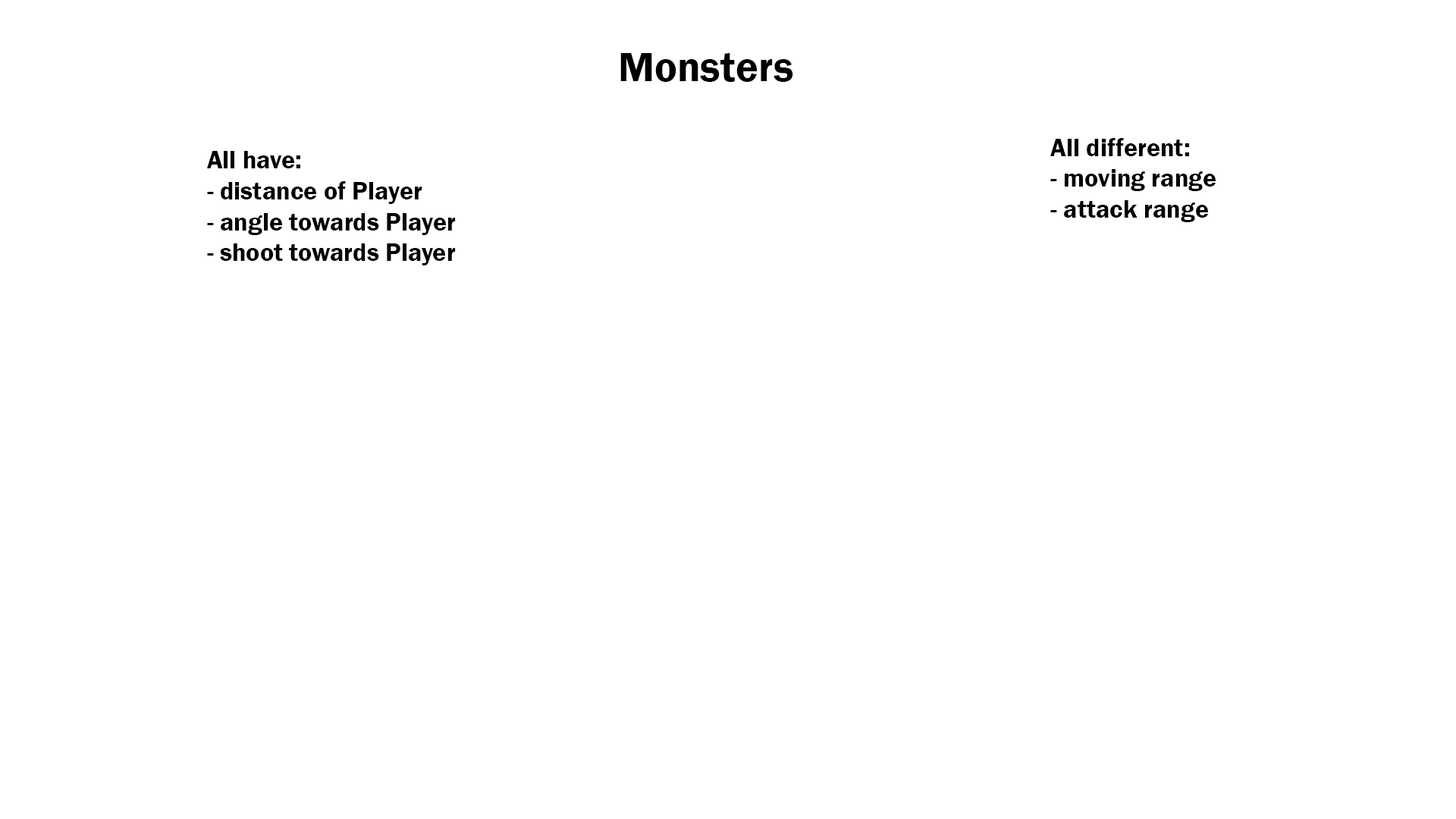
<style>
.page{position:relative;width:1456px;height:819px;background:#ffffff}
.page>*{position:absolute;margin:0}
.t1{font:42.5px "FranklinGothic-Demi";color:#000000}
.t2{font:25.8px "FranklinGothic-Demi";color:#000000}
</style>
<div class="page">
<p class="t1" style="left:620px;top:53px;width:173px;height:29px">Monsters</p>
<p class="t2" style="left:1050px;top:138px;width:166px;height:84px">All different:<br>- moving range<br>- attack range</p>
<p class="t2" style="left:207px;top:151px;width:249px;height:114px">All have:<br>- distance of Player<br>- angle towards Player<br>- shoot towards Player</p>
</div>
